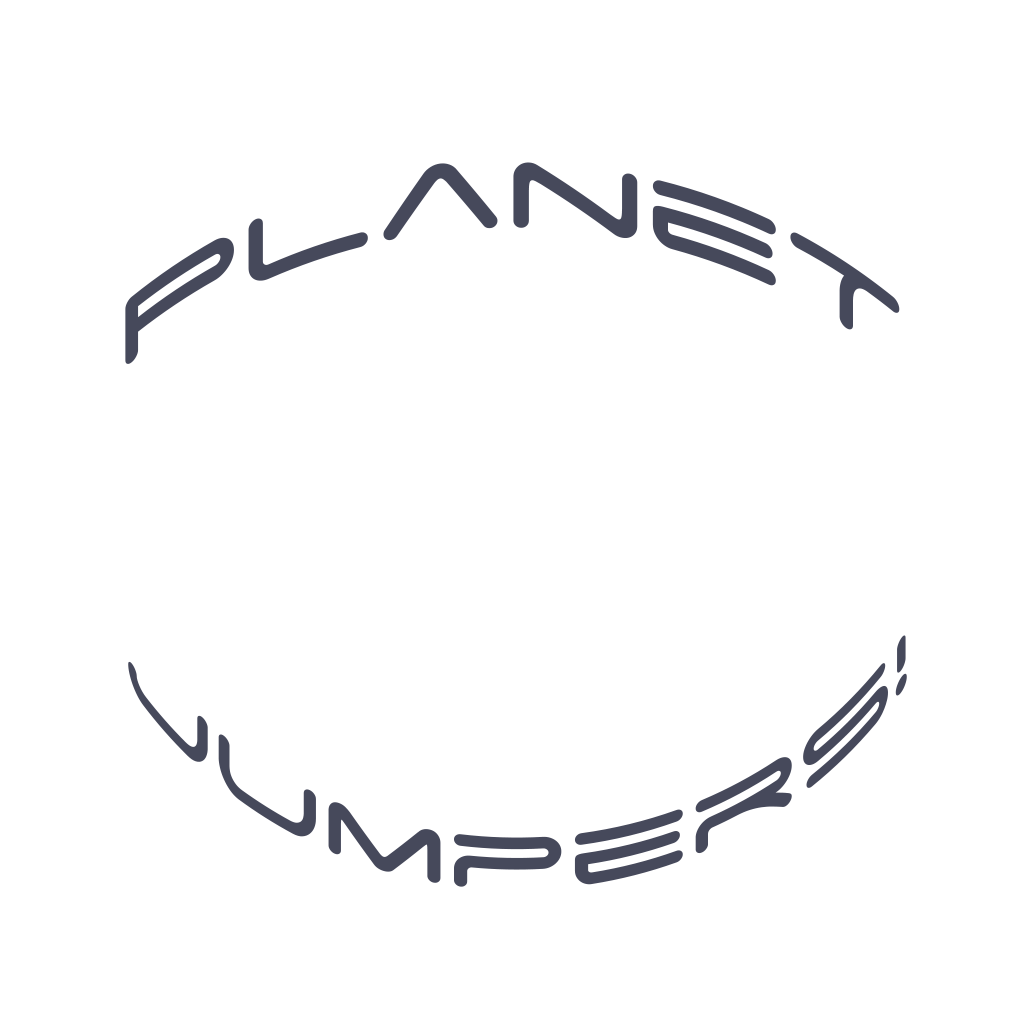
<style>
.page{position:relative;width:1024px;height:1024px;background:#ffffff}
.page>*{position:absolute;margin:0}
.t1{font:150px "SpaceAge";color:#46495b}
.t2{font:120px "SpaceAge";color:#46495b}
</style>
<div class="page">
<p class="t1" style="left:125px;top:162px;width:775px;height:202px">PlaneT</p>
<p class="t2" style="left:128px;top:635px;width:779px;height:252px">Jumpers!</p>
</div>
